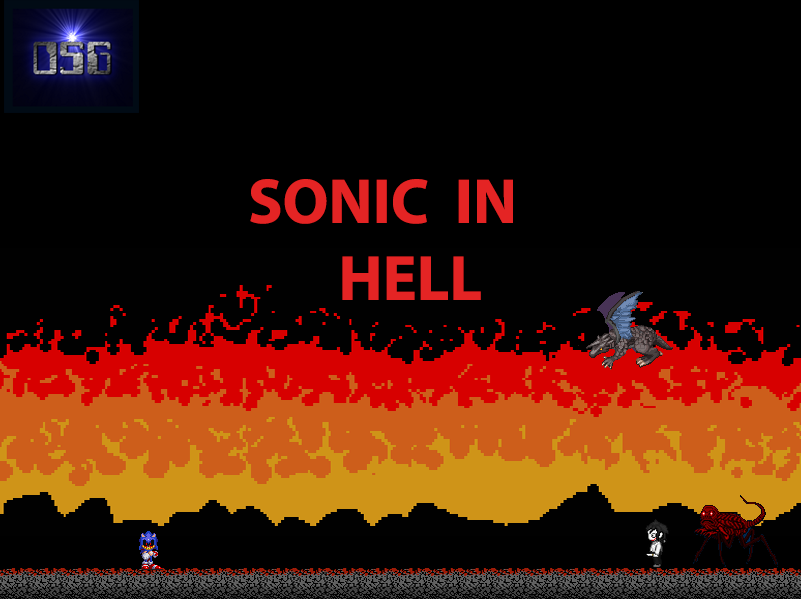
<style>
.page{position:relative;width:801px;height:599px;background:#000000}
.page>*{position:absolute;margin:0}
.t1{font:64px "MyriadPro-Bold";color:#e42424}
</style>
<div class="page">
<p class="t1" style="left:250px;top:179px;width:263px;height:121px">SONIC  IN<br>       HELL</p>
</div>
